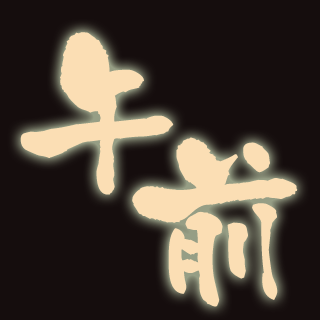
<style>
.page{position:relative;width:320px;height:320px;background:#150d0d}
.page>*{position:absolute;margin:0}
.t1{font:180px "KyoMadoka";color:#fbdeb4;font-weight:bold}
</style>
<div class="page">
<p class="t1" style="left:20px;top:32px;width:154px;height:163px">午</p>
<p class="t1" style="left:132px;top:137px;width:166px;height:170px">前</p>
</div>
